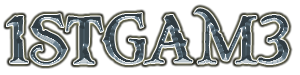
<style>
.page{position:relative;width:300px;height:75px;background:#ffffff}
.page>*{position:absolute;margin:0}
.t1{font:72px "PiecesofEight"}
</style>
<div class="page">
<p class="t1" style="left:6px;top:8px;width:283px;height:57px">1STGAM3</p>
</div>
